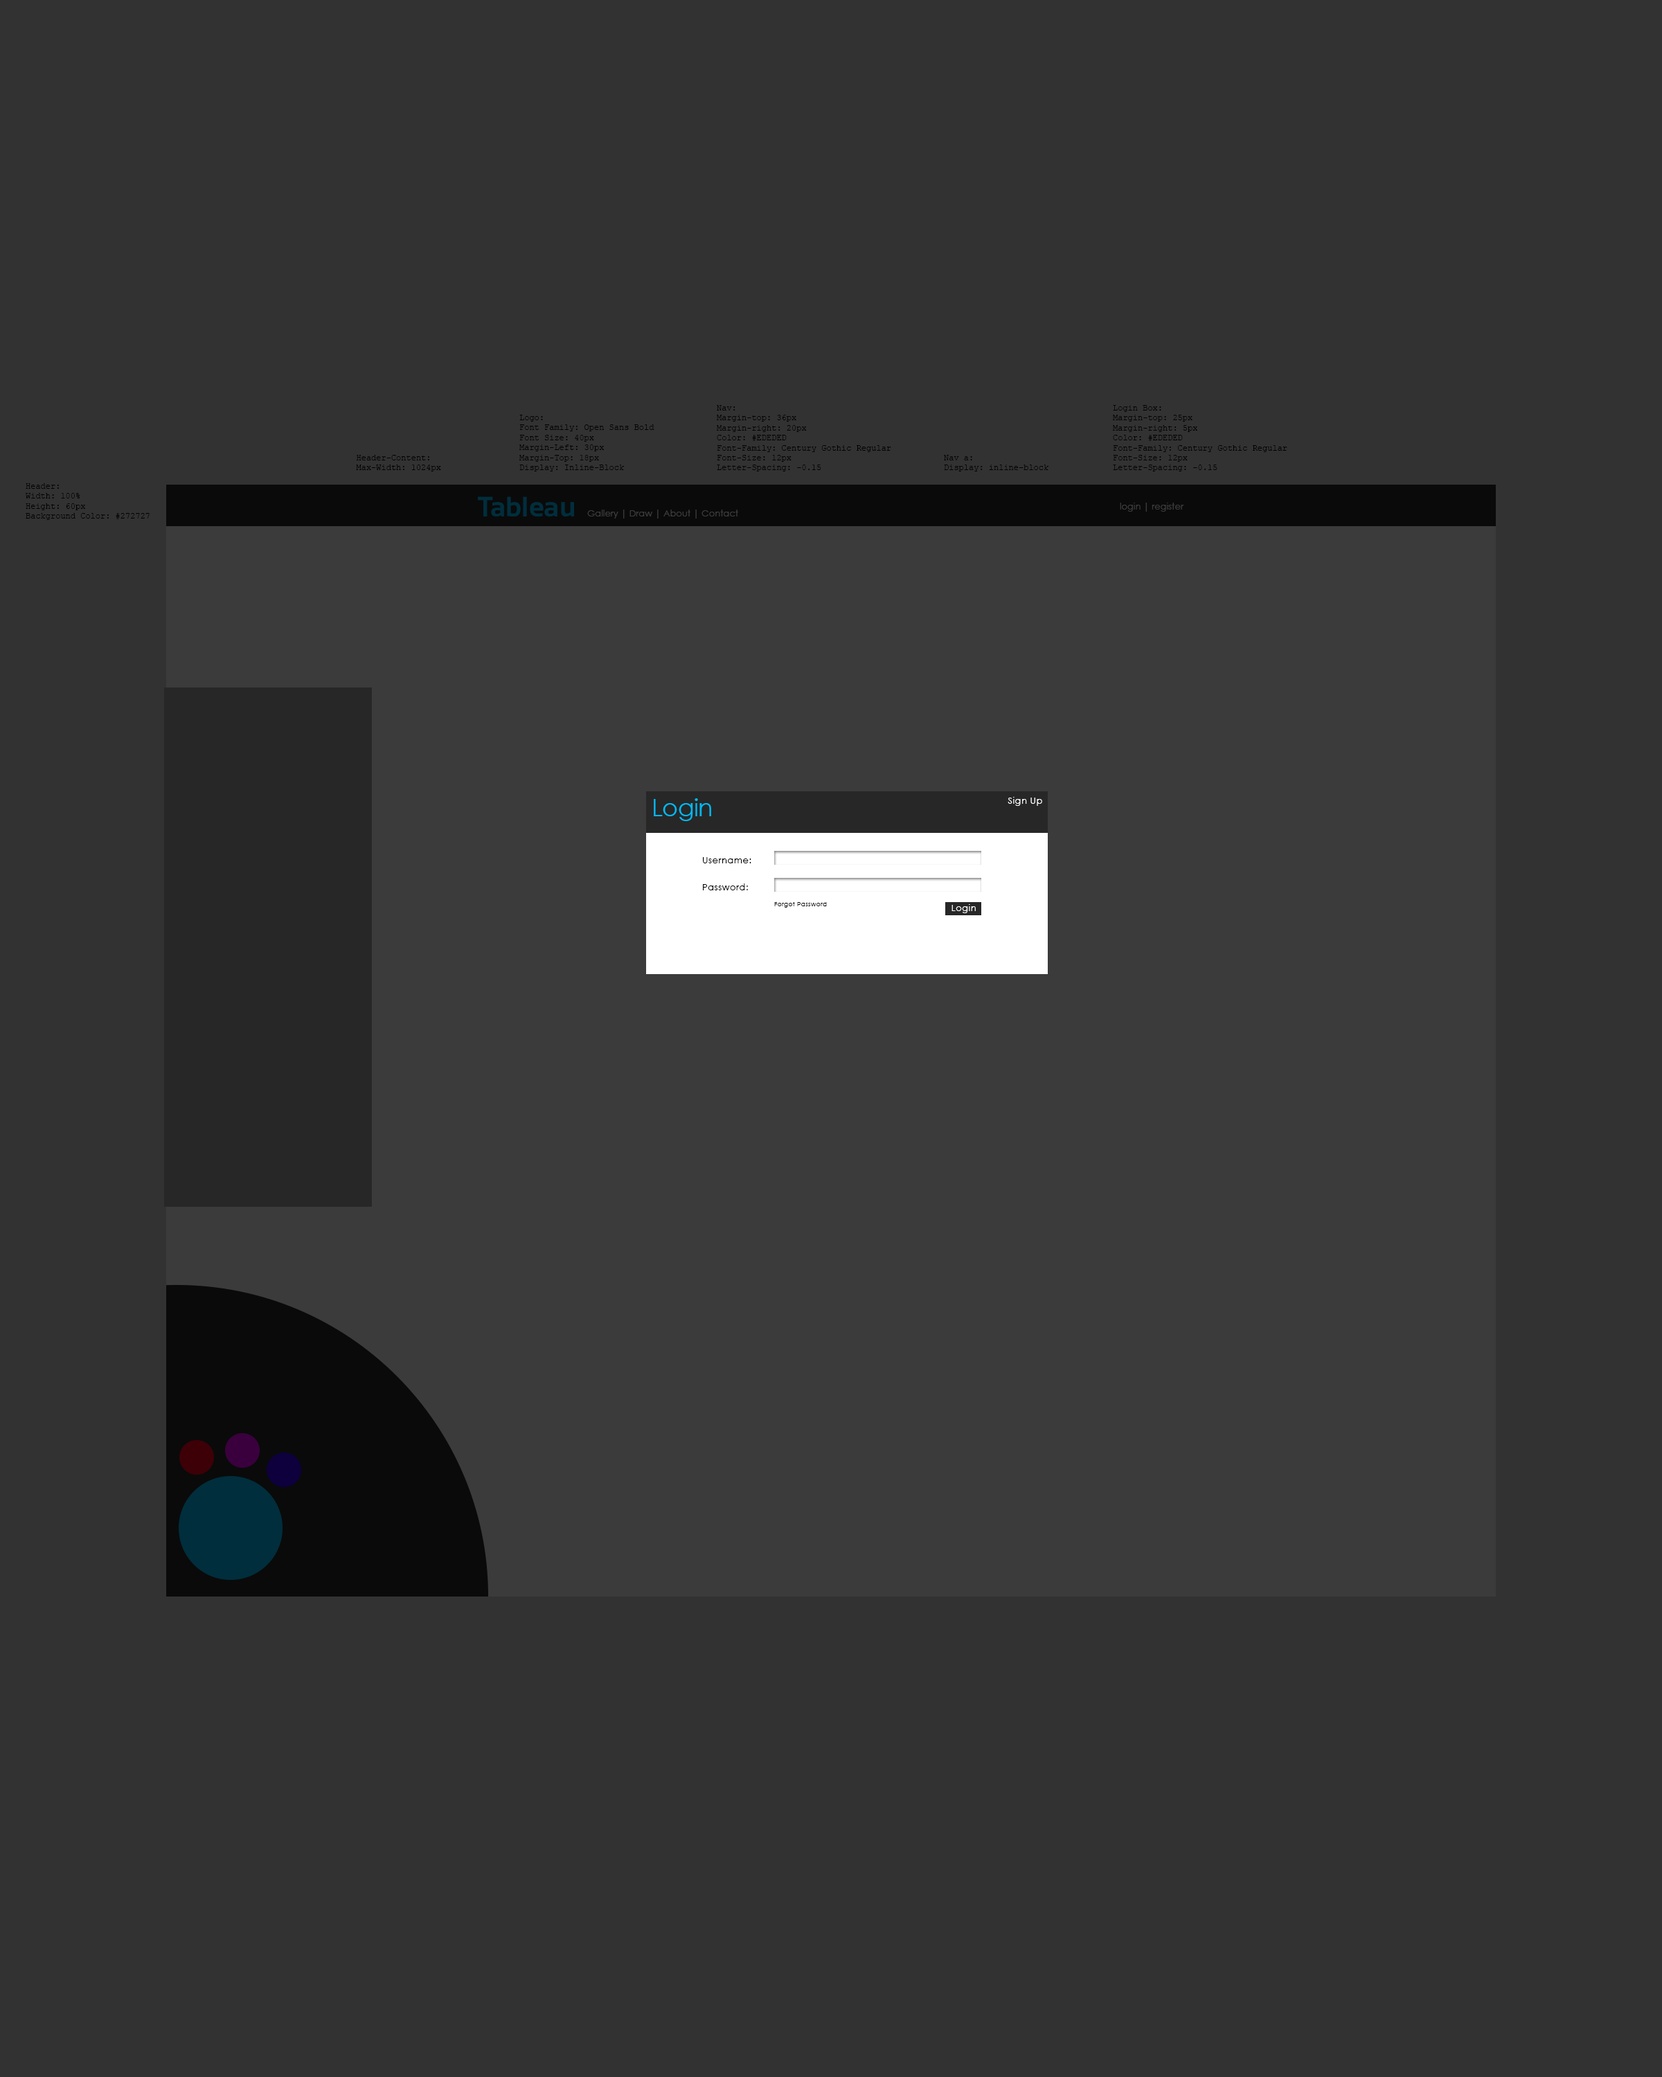
<style>
.page{position:relative;width:1662px;height:2077px;background:#323232}
.page>*{position:absolute;margin:0}
.t1{font:8.3px "CourierNewPSMT";color:#000000}
.t2{font:28px "Sansation-Bold";color:#002e3d}
.t3{font:9px "CenturyGothic";color:#3b3b3b}
.t4{font:9px "CenturyGothic";letter-spacing:0.04em;color:#ffffff}
.t5{font:24.2px "CenturyGothic";letter-spacing:-0.02em;color:#00b9f2}
.t6{font:9px "CenturyGothic";letter-spacing:0.04em;color:#000000}
.t7{font:6.2px "CenturyGothic";letter-spacing:0.04em;color:#000000}
</style>
<div class="page">
<p class="t1" style="left:717px;top:405px;width:174px;height:66px">Nav:<br>Margin-top: 36px<br>Margin-right: 20px<br>Color: #EDEDED<br>Font-Family: Century Gothic Regular<br>Font-Size: 12px<br>Letter-Spacing: -0.15</p>
<p class="t1" style="left:1113px;top:405px;width:174px;height:66px">Login Box:<br>Margin-top: 25px<br>Margin-right: 5px<br>Color: #EDEDED<br>Font-Family: Century Gothic Regular<br>Font-Size: 12px<br>Letter-Spacing: -0.15</p>
<p class="t1" style="left:519px;top:415px;width:135px;height:56px">Logo:<br>Font Family: Open Sans Bold<br>Font Size: 40px<br>Margin-Left: 30px<br>Margin-Top: 18px<br>Display: Inline-Block</p>
<p class="t1" style="left:356px;top:455px;width:85px;height:16px">Header-Content:<br>Max-Width: 1024px</p>
<p class="t1" style="left:944px;top:455px;width:105px;height:16px">Nav a:<br>Display: inline-block</p>
<p class="t1" style="left:26px;top:483px;width:124px;height:37px">Header:<br>Width: 100%<br>Height: 60px<br>Background Color: #272727</p>
<p class="t2" style="left:478px;top:496px;width:96px;height:20px">Tableau</p>
<p class="t3" style="left:587px;top:510px;width:151px;height:9px">Gallery | Draw | About | Contact</p>
<p class="t3" style="left:1119px;top:503px;width:65px;height:9px">login | register</p>
<p class="t4" style="left:1007px;top:797px;width:35px;height:9px">Sign Up</p>
<p class="t5" style="left:654px;top:798px;width:57px;height:23px">Login</p>
<p class="t6" style="left:703px;top:857px;width:48px;height:6px">Username:</p>
<p class="t6" style="left:703px;top:883px;width:45px;height:7px">Password:</p>
<p class="t7" style="left:774px;top:902px;width:53px;height:6px">Forgot Password</p>
<p class="t4" style="left:951px;top:904px;width:24px;height:9px">Login</p>
</div>
